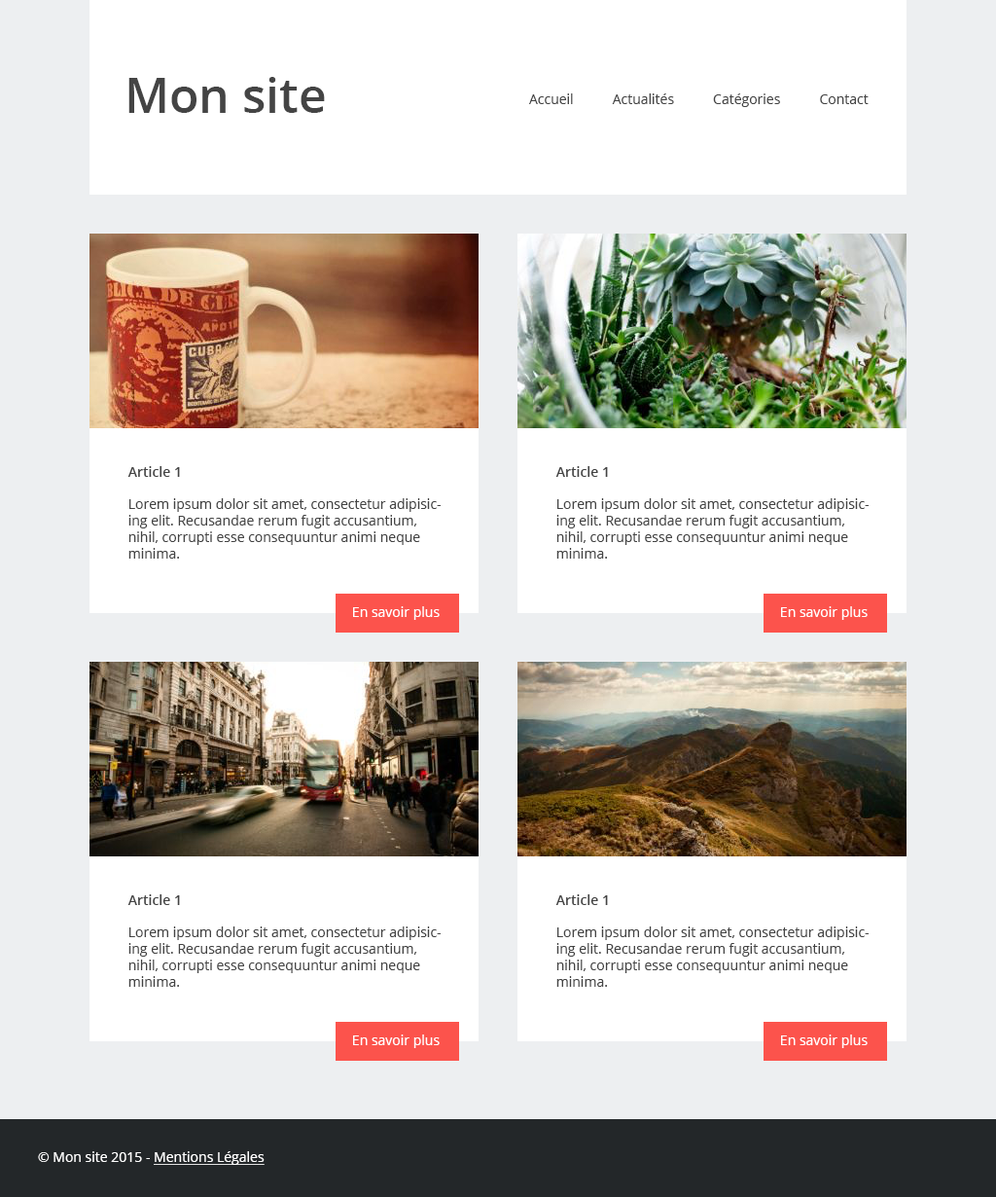
<style>
.page{position:relative;width:996px;height:1197px;background:#ffffff}
.page>*{position:absolute;margin:0}
.t1{font:48.7px "OpenSans-Semibold";color:#444444}
.t2{font:13.6px "OpenSans";color:#444444}
.t3{font:13.6px "OpenSans-Semibold";color:#444444}
.t4{font:13.6px "OpenSans";color:#ffffff}
.t5{font:13.6px "OpenSans";color:#ffffff;text-decoration:underline}
</style>
<div class="page">
<p class="t1" style="left:128px;top:77px;width:197px;height:36px">Mon site</p>
<p class="t2" style="left:529px;top:93px;width:340px;height:14px">Accueil           Actualités           Catégories           Contact</p>
<p class="t2" style="left:127px;top:466px;width:314px;height:93px"><span class="t3">Article 1<br></span><br>Lorem ipsum dolor sit amet, consectetur adipisicing elit. Recusandae rerum fugit accusantium, nihil, corrupti esse consequuntur animi neque minima.</p>
<p class="t2" style="left:556px;top:466px;width:313px;height:93px"><span class="t3">Article 1<br></span><br>Lorem ipsum dolor sit amet, consectetur adipisicing elit. Recusandae rerum fugit accusantium, nihil, corrupti esse consequuntur animi neque minima.</p>
<p class="t4" style="left:353px;top:606px;width:87px;height:14px">En savoir plus</p>
<p class="t4" style="left:781px;top:606px;width:87px;height:14px">En savoir plus</p>
<p class="t2" style="left:127px;top:894px;width:314px;height:93px"><span class="t3">Article 1<br></span><br>Lorem ipsum dolor sit amet, consectetur adipisicing elit. Recusandae rerum fugit accusantium, nihil, corrupti esse consequuntur animi neque minima.</p>
<p class="t2" style="left:556px;top:894px;width:313px;height:93px"><span class="t3">Article 1<br></span><br>Lorem ipsum dolor sit amet, consectetur adipisicing elit. Recusandae rerum fugit accusantium, nihil, corrupti esse consequuntur animi neque minima.</p>
<p class="t4" style="left:353px;top:1034px;width:87px;height:14px">En savoir plus</p>
<p class="t4" style="left:781px;top:1034px;width:87px;height:14px">En savoir plus</p>
<p class="t4" style="left:38px;top:1151px;width:227px;height:14px">© Mon site 2015 - <span class="t5">Mentions Légales</span></p>
</div>
